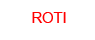
<style>
.page{position:relative;width:95px;height:40px;background:#ffffff}
.page>*{position:absolute;margin:0}
.t1{font:14.7px "ArialMT";color:#ff0000}
</style>
<div class="page">
<p class="t1" style="left:32px;top:12px;width:34px;height:11px">ROTI</p>
</div>
